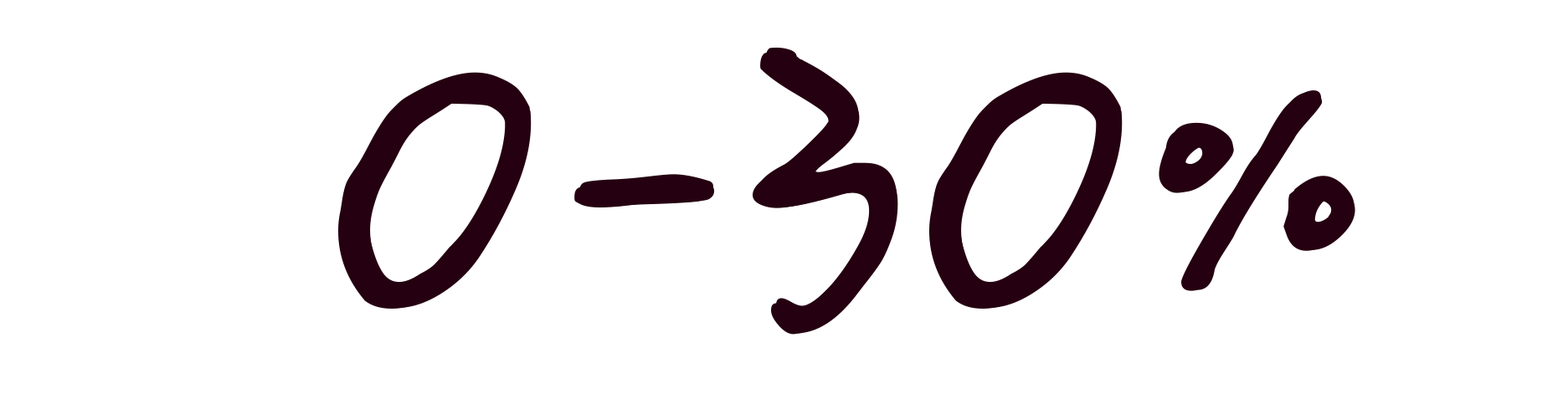
<style>
.page{position:relative;width:1568px;height:394px;background:#ffffff}
.page>*{position:absolute;margin:0}
.t1{font:554.6px "ChenYuluoyan-Thin-Monospaced";color:#250011;text-transform:uppercase}
</style>
<div class="page">
<p class="t1" style="left:338px;top:52px;width:1012px;height:283px">0-30%</p>
<p class="t1" style="left:343px;top:47px;width:1012px;height:283px">0-30%</p>
<p class="t1" style="left:344px;top:51px;width:1011px;height:283px">0-30%</p>
</div>
